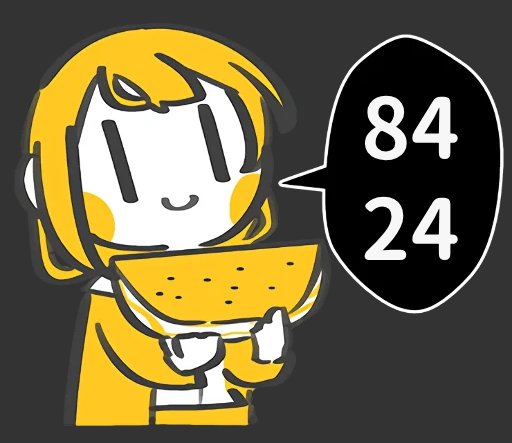
<style>
.page{position:relative;width:512px;height:443px;background:#333333}
.page>*{position:absolute;margin:0}
.t1{font:84px "ShangguRoundTC-Bold";color:#f7f7f7}
</style>
<div class="page">
<p class="t1" style="left:364px;top:95px;width:94px;height:165px">84<br>24</p>
</div>
